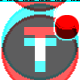
<style>
.page{position:relative;width:80px;height:80px;background:#5d5d5e}
.page>*{position:absolute;margin:0}
.t1{font:48px "Arial-Black"}
</style>
<div class="page">
<p class="t1" style="left:24px;top:25px;width:33px;height:34px">T</p>
</div>
